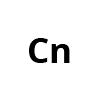
<style>
.page{position:relative;width:100px;height:100px;background:#ffffff}
.page>*{position:absolute;margin:0}
.t1{font:35px "OpenSans-Bold";color:#000000}
</style>
<div class="page">
<p class="t1" style="left:29px;top:38px;width:41px;height:25px">Cn</p>
</div>
